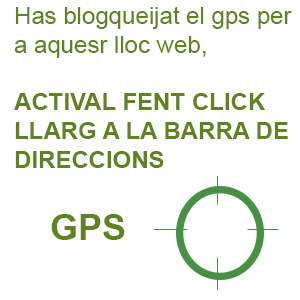
<style>
.page{position:relative;width:300px;height:300px;background:#ffffff}
.page>*{position:absolute;margin:0}
.t1{font:24px "Arial-BoldMT";color:#608220}
.t2{font:24px "ArialMT";color:#608220}
.t3{font:36px "Arial-BoldMT";color:#608220}
</style>
<div class="page">
<p class="t1" style="left:14px;top:6px;width:278px;height:162px"><span class="t2">Has blogqueijat el gps per<br>a aquesr lloc web, <br><br></span>ACTIVAL FENT CLICK <br>LLARG A LA BARRA DE<br>DIRECCIONS</p>
<p class="t3" style="left:51px;top:214px;width:74px;height:26px">GPS</p>
</div>
